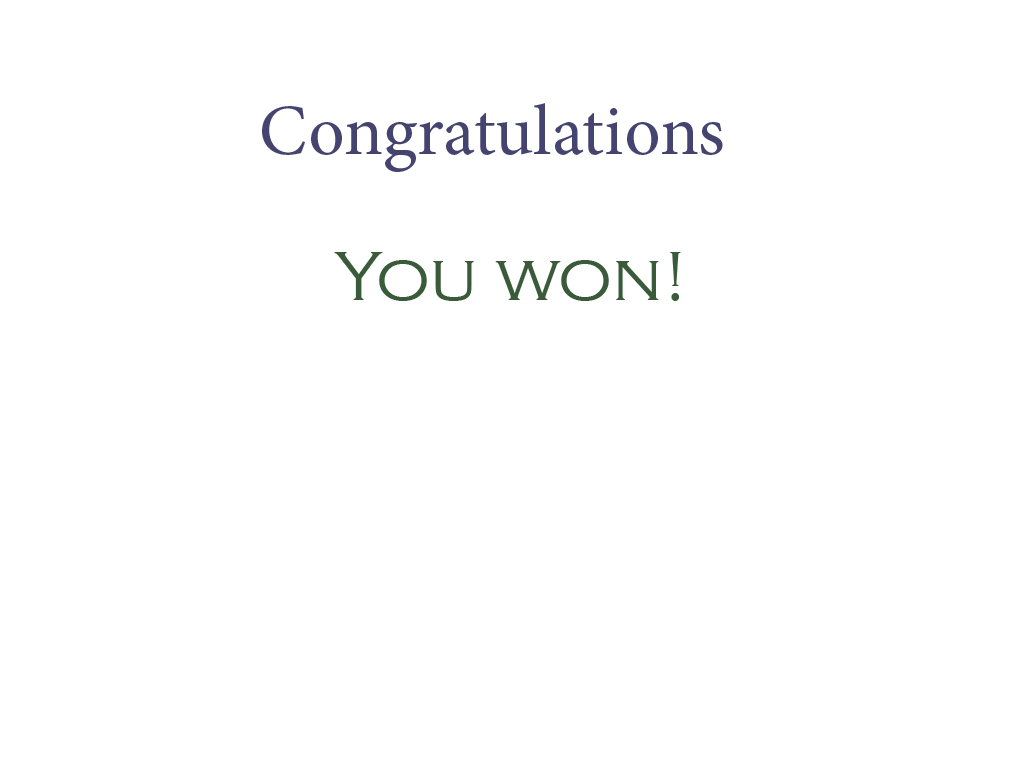
<style>
.page{position:relative;width:1024px;height:768px;background:#ffffff}
.page>*{position:absolute;margin:0}
.t1{font:72px "MinionPro-Regular";color:#45436f}
.t2{font:72px "CopperplateGothic-Light";color:#3a5b3a}
</style>
<div class="page">
<p class="t1" style="left:262px;top:103px;width:461px;height:69px">Congratulations</p>
<p class="t2" style="left:334px;top:252px;width:347px;height:49px">You won!</p>
</div>
